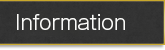
<style>
.page{position:relative;width:165px;height:50px}
.page>*{position:absolute;margin:0}
.t1{font:20px "GothicMB101Pro-Light";color:#fbfbf9}
</style>
<div class="page">
<p class="t1" style="left:17px;top:14px;width:108px;height:16px">Information</p>
</div>
